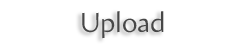
<style>
.page{position:relative;width:246px;height:48px;background:#ffffff}
.page>*{position:absolute;margin:0}
.t1{font:28px "Amira-Roman";color:#474747}
</style>
<div class="page">
<p class="t1" style="left:82px;top:11px;width:82px;height:28px">Upload</p>
</div>
